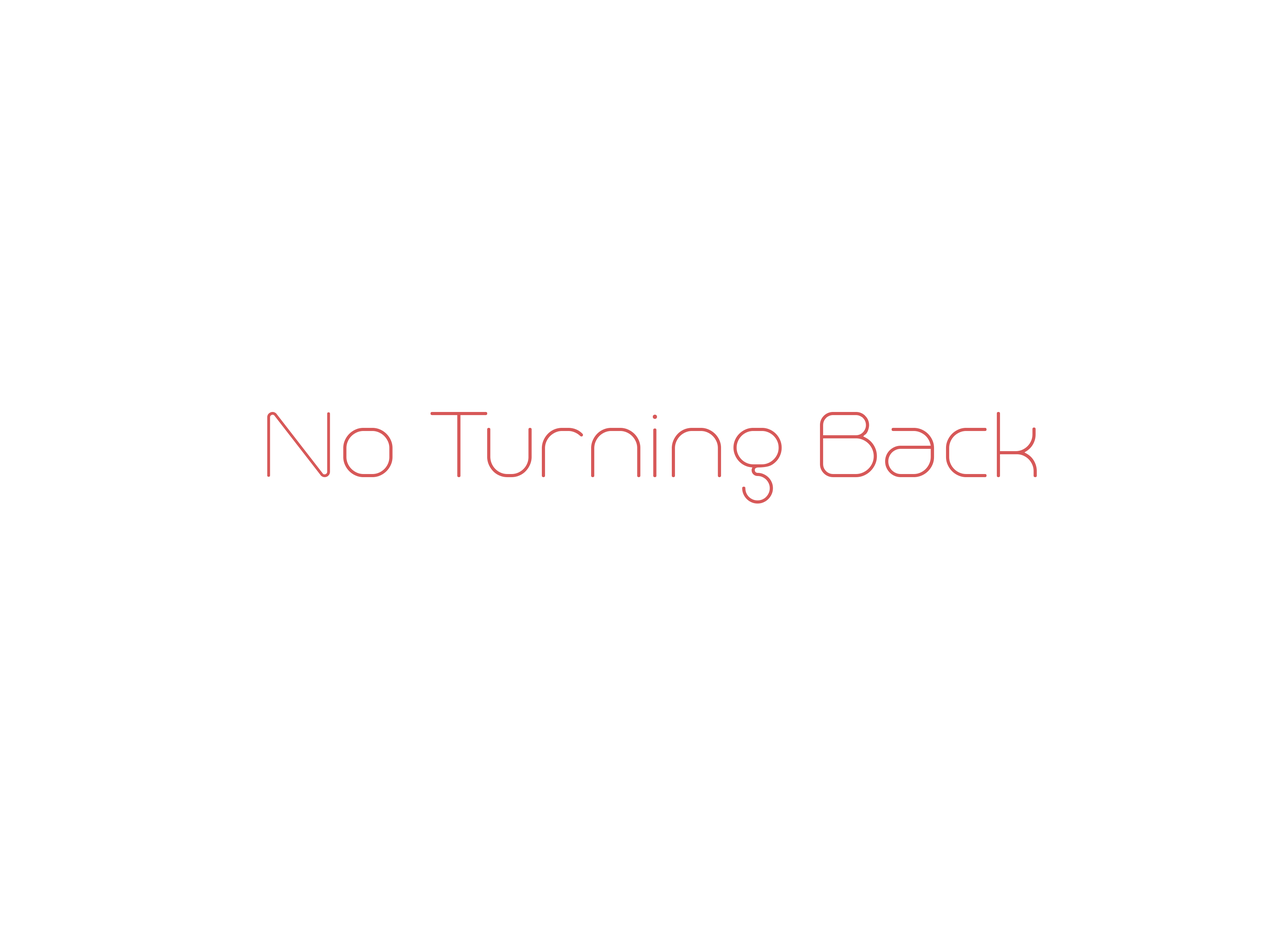
<style>
.page{position:relative;width:1280px;height:931px;background:#ffffff}
.page>*{position:absolute;margin:0}
.t1{font:116.4px "Trench-Thin";color:#d75858}
</style>
<div class="page">
<p class="t1" style="left:267px;top:412px;width:770px;height:92px">No Turning Back</p>
</div>
